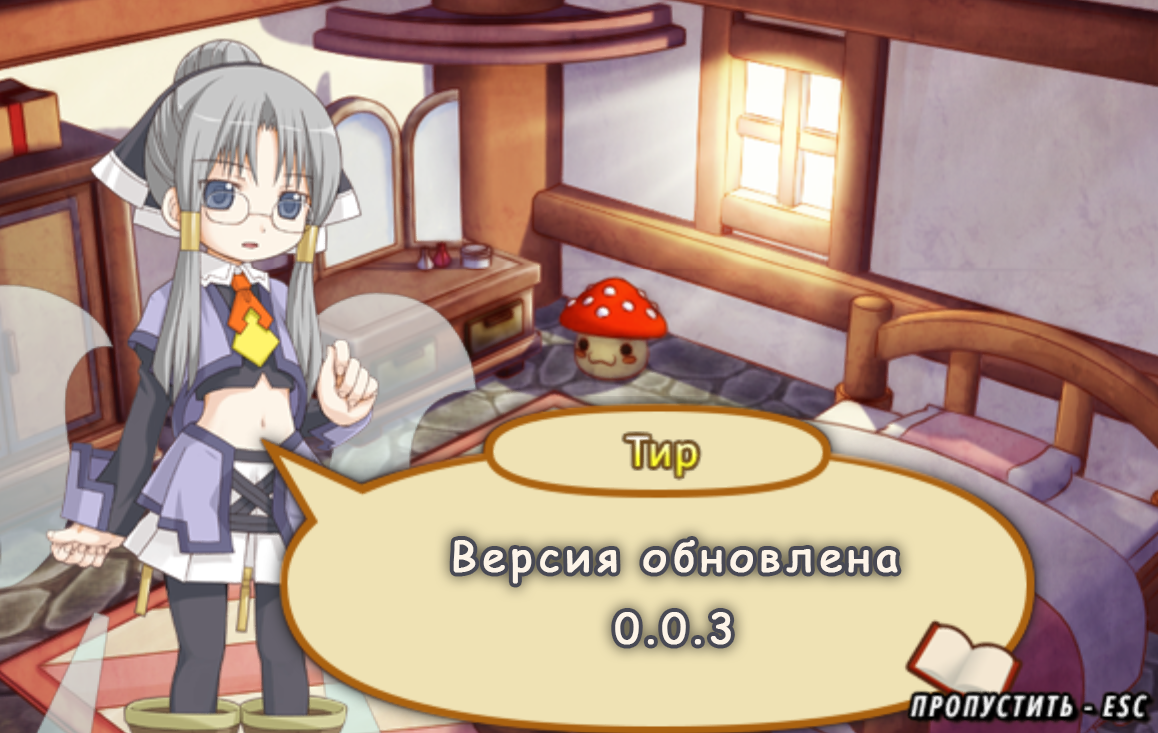
<style>
.page{position:relative;width:1158px;height:733px}
.page>*{position:absolute;margin:0}
.t1{font:41px/72px "ComicSansMS";letter-spacing:0.12em;color:#ffffff;font-weight:bold}
</style>
<div class="page">
<p class="t1" style="left:453px;top:540px;width:445px;height:105px;text-align:center">Версия обновлена<br>0.0.3</p>
</div>
